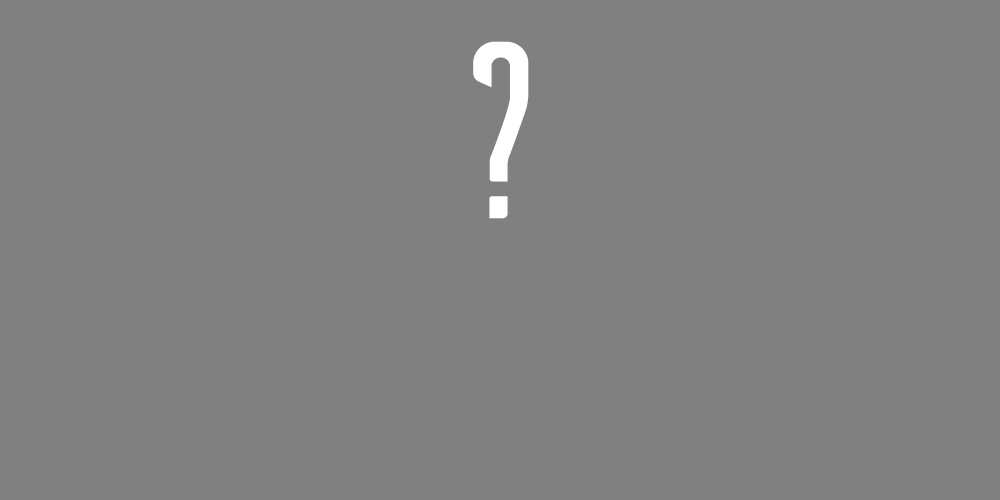
<style>
.page{position:relative;width:1000px;height:500px;background:#808080}
.page>*{position:absolute;margin:0}
.t1{font:250px "Ailerons-Regular";color:#ffffff}
</style>
<div class="page">
<p class="t1" style="left:473px;top:41px;width:56px;height:178px">?</p>
</div>
